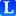
<style>
.page{position:relative;width:16px;height:16px}
.page>*{position:absolute;margin:0}
.t1{font:18px "PiratesBay";color:#eff0f4;font-weight:bold}
</style>
<div class="page">
<p class="t1" style="left:3px;top:1px;width:11px;height:13px">L</p>
</div>
